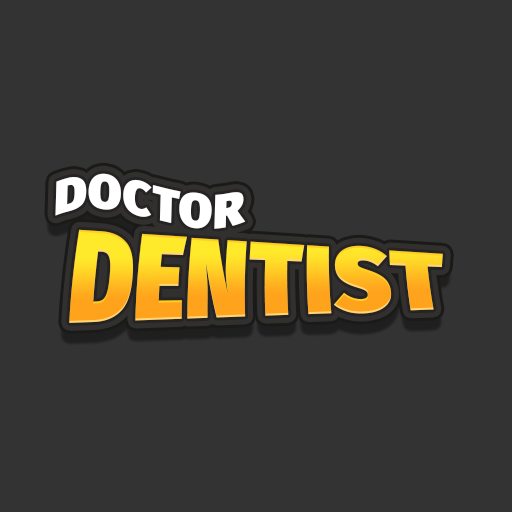
<style>
.page{position:relative;width:512px;height:512px;background:#333333}
.page>*{position:absolute;margin:0}
.t1{font:48.6px "FiraSans-Ultra";letter-spacing:0.025em;color:#ffffff}
.t2{font:77.8px "FiraSans-Ultra";letter-spacing:0.01em;scale:1.25 1}
</style>
<div class="page">
<p class="t1" style="left:55px;top:173px;width:191px;height:56px;rotate:2deg">DOCTOR</p>
<p class="t2" style="left:69px;top:229px;width:374px;height:94px">DENTIST</p>
</div>
